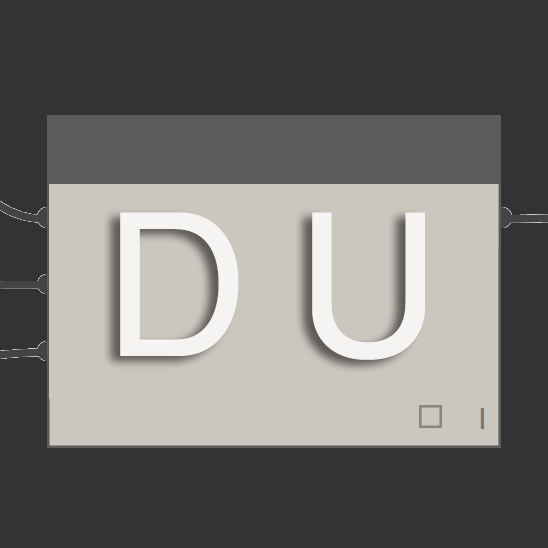
<style>
.page{position:relative;width:548px;height:548px;background:#333333}
.page>*{position:absolute;margin:0}
.t1{font:200px "HelveticaWorld-Regular";color:#ffffff}
</style>
<div class="page">
<p class="t1" style="left:120px;top:212px;width:306px;height:148px;opacity:0.8">D U</p>
</div>
